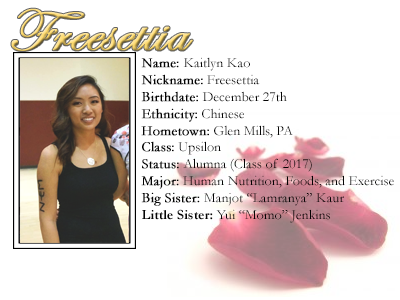
<style>
.page{position:relative;width:400px;height:300px;background:#ffffff}
.page>*{position:absolute;margin:0}
.t1{font:60px "EdwardianScriptITC";font-weight:bold}
.t2{font:14px "Garamond";color:#000000}
.t3{font:14px "Garamond";color:#000000;font-weight:bold}
.t4{font:14px "Garamond-Bold";color:#000000}
</style>
<div class="page">
<p class="t1" style="left:11px;top:8px;width:182px;height:43px">Freesettia</p>
<p class="t2" style="left:141px;top:57px;width:253px;height:166px"><span class="t3">Name: </span>Kaitlyn Kao<br><span class="t3">Nickname:</span> Freesettia<br><span class="t3">Birthdate:</span> December 27th<br><span class="t3">Ethnicity:</span> Chinese<br><span class="t3">Hometown:</span> Glen Mills, PA<br><span class="t3">Class:</span> Upsilon<br><span class="t3">Status:</span> Alumna (Class of 2017)<br><span class="t3">Major:</span> Human Nutrition, Foods, and Exercise<br><span class="t3">Big Sister: </span>Manjot “Lamranya” Kaur<br><span class="t4">Little Sister: </span>Yui “Momo” Jenkins</p>
</div>
